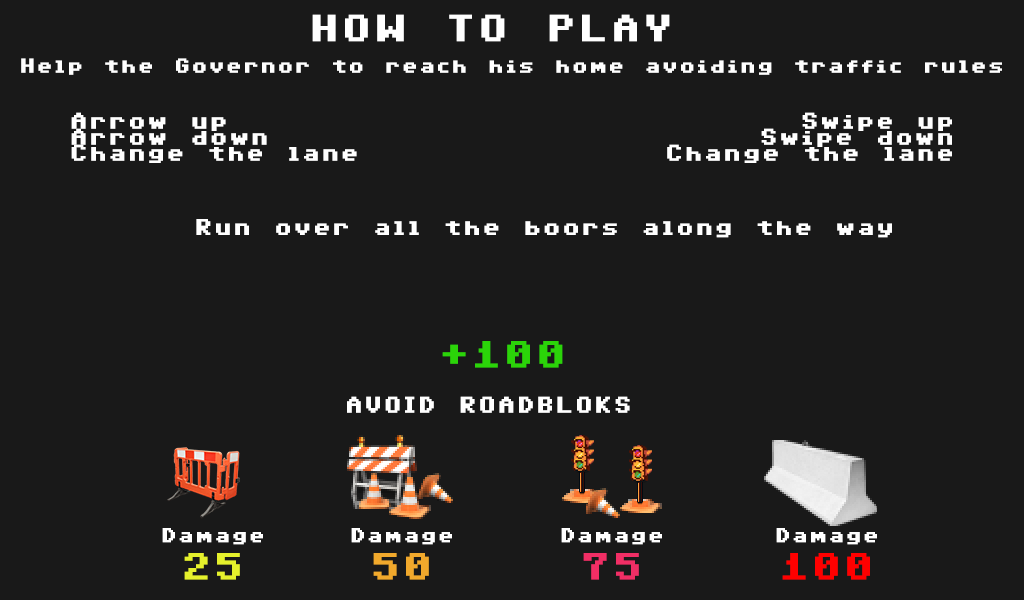
<style>
.page{position:relative;width:1024px;height:600px;background:#191919}
.page>*{position:absolute;margin:0}
.t1{font:30px "C64Pro";letter-spacing:0.2em;color:#ffffff}
.t2{font:16px "C64Pro";letter-spacing:0.2em;color:#ffffff}
.t3{font:18px/16px "C64Pro";letter-spacing:0.2em;color:#ffffff}
.t4{font:18px "C64Pro";letter-spacing:0.2em;color:#ffffff}
.t5{font:30px "C64Pro";letter-spacing:0.2em;color:#2bd409}
.t6{font:30px "C64Pro";letter-spacing:0.2em;color:#e5f12c}
.t7{font:30px "C64Pro";letter-spacing:0.2em;color:#f1a92c}
.t8{font:30px "C64Pro";letter-spacing:0.2em;color:#f12e65}
.t9{font:30px "C64Pro";letter-spacing:0.2em;color:#ff0000}
</style>
<div class="page">
<p class="t1" style="left:312px;top:14px;width:358px;height:28px">HOW TO PLAY</p>
<p class="t2" style="left:21px;top:58px;width:981px;height:17px">Help the Governor to reach his home avoiding traffic rules</p>
<p class="t3" style="left:71px;top:112px;width:286px;height:51px">Arrow up<br>Arrow down<br>Change the lane</p>
<p class="t3" style="left:667px;top:112px;width:285px;height:51px;text-align:right">Swipe up<br>Swipe down<br>Change the lane</p>
<p class="t4" style="left:196px;top:219px;width:696px;height:19px">Run over all the boors along the way</p>
<p class="t5" style="left:442px;top:341px;width:121px;height:27px">+100</p>
<p class="t4" style="left:347px;top:396px;width:283px;height:17px">AVOID ROADBLOKS</p>
<p class="t2" style="left:162px;top:528px;width:101px;height:17px">Damage</p>
<p class="t2" style="left:351px;top:528px;width:101px;height:17px">Damage</p>
<p class="t2" style="left:561px;top:528px;width:101px;height:17px">Damage</p>
<p class="t2" style="left:776px;top:528px;width:101px;height:17px">Damage</p>
<p class="t6" style="left:184px;top:553px;width:56px;height:27px">25</p>
<p class="t7" style="left:373px;top:553px;width:56px;height:27px">50</p>
<p class="t8" style="left:583px;top:553px;width:56px;height:27px">75</p>
<p class="t9" style="left:782px;top:553px;width:88px;height:27px">100</p>
</div>
